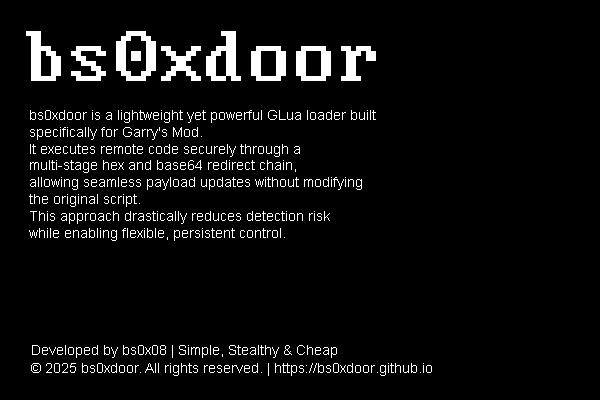
<style>
.page{position:relative;width:600px;height:400px;background:#000000}
.page>*{position:absolute;margin:0}
.t1{font:80px "Web437_IBM_VGA_9x16";color:#ffffff}
.t2{font:14px "ArialMT";color:#ffffff}
</style>
<div class="page">
<p class="t1" style="left:26px;top:31px;width:350px;height:50px">bs0xdoor</p>
<p class="t2" style="left:29px;top:110px;width:347px;height:131px">bs0xdoor is a lightweight yet powerful GLua loader built<br>specifically for Garry's Mod. <br>It executes remote code securely through a <br>multi-stage hex and base64 redirect chain, <br>allowing seamless payload updates without modifying <br>the original script. <br>This approach drastically reduces detection risk <br>while enabling flexible, persistent control.</p>
<p class="t2" style="left:32px;top:345px;width:305px;height:13px">Developed by bs0x08 | Simple, Stealthy &amp; Cheap</p>
<p class="t2" style="left:31px;top:363px;width:401px;height:13px">© 2025 bs0xdoor. All rights reserved. | https://bs0xdoor.github.io</p>
</div>
